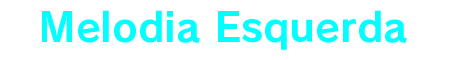
<style>
.page{position:relative;width:450px;height:60px;background:#ffffff}
.page>*{position:absolute;margin:0}
.t1{font:40px "RodinPro-B";color:#00ffff}
</style>
<div class="page">
<p class="t1" style="left:42px;top:10px;width:365px;height:40px">Melodia Esquerda</p>
</div>
